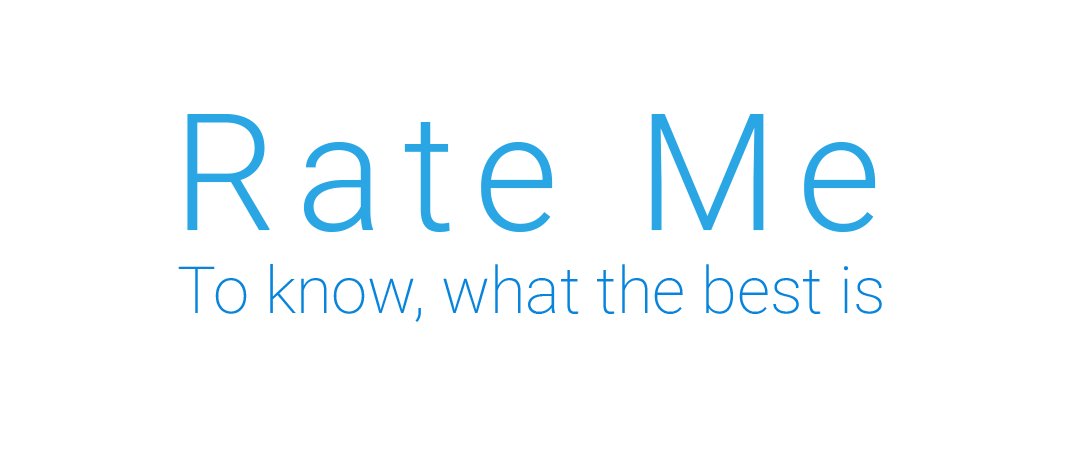
<style>
.page{position:relative;width:1080px;height:472px;background:#ffffff}
.page>*{position:absolute;margin:0}
.t1{font:162.6px "Roboto-Light";letter-spacing:0.12em;color:#2aa6e4}
.t2{font:65px "Roboto-ExtraLight";color:#0884dc}
</style>
<div class="page">
<p class="t1" style="left:187px;top:114px;width:689px;height:118px">Rate Me</p>
<p class="t2" style="left:178px;top:264px;width:704px;height:58px">To know, what the best is</p>
</div>
